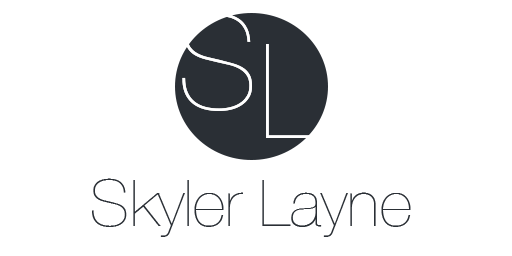
<style>
.page{position:relative;width:512px;height:256px;background:#ffffff}
.page>*{position:absolute;margin:0}
.t1{font:64.4px "HelveticaNeue-UltraLight";color:#2a2f35}
</style>
<div class="page">
<p class="t1" style="left:92px;top:178px;width:319px;height:59px">Skyler Layne</p>
</div>
